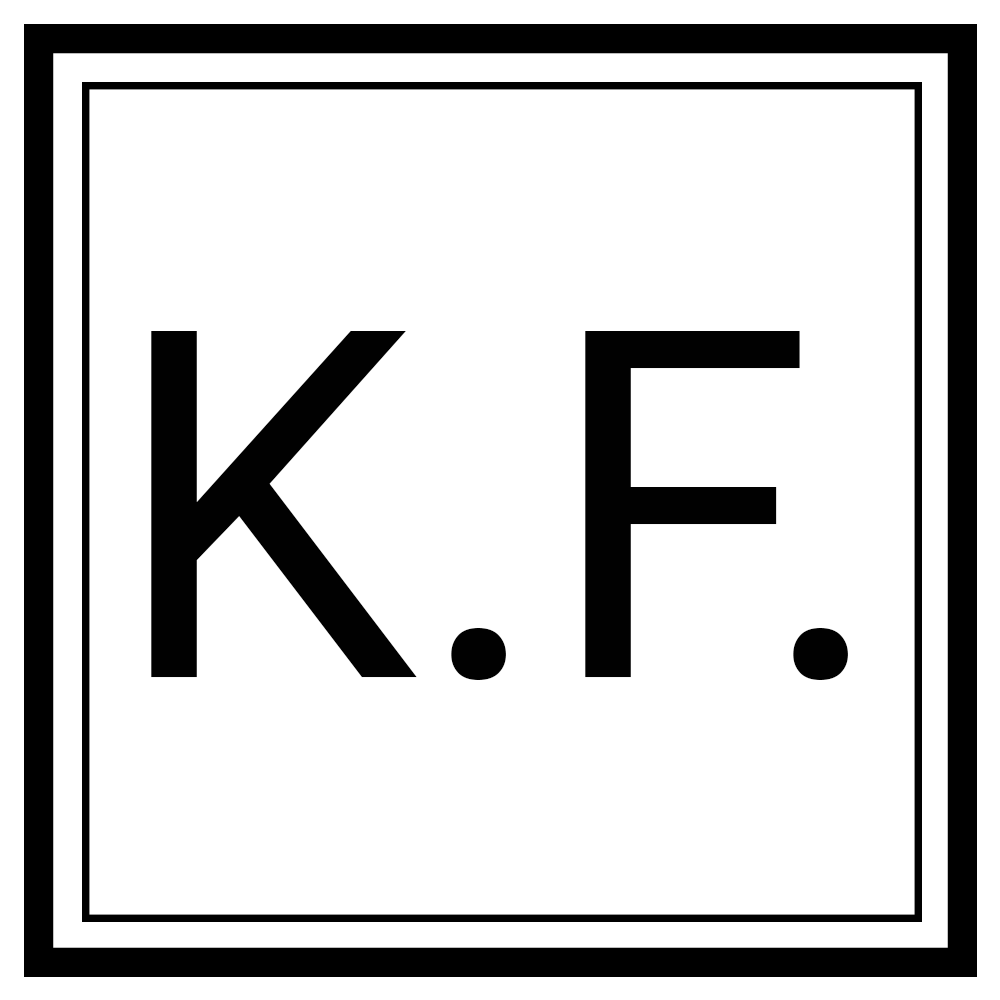
<style>
.page{position:relative;width:1000px;height:1000px;background:#ffffff}
.page>*{position:absolute;margin:0}
.t1{font:487.5px "Roboto-Regular";color:#010101}
</style>
<div class="page">
<p class="t1" style="left:151px;top:331px;width:697px;height:349px">K.F.</p>
</div>
